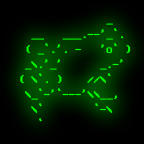
<style>
.page{position:relative;width:144px;height:144px}
.page>*{position:absolute;margin:0}
.t1{font:12.5px "PxPlus_IBM_VGA8";color:#00ff00}
</style>
<div class="page">
<p class="t1" style="left:20px;top:23px;width:111px;height:99px">_   <br>  __   ___.--'_`. <br> ( _`.'. -   'o` )<br> _\.'_'      _.-' <br>( \`. )    //\`   <br> \_`-'`---'\\__,  <br>  \`        `-\   <br>   `</p>
</div>
